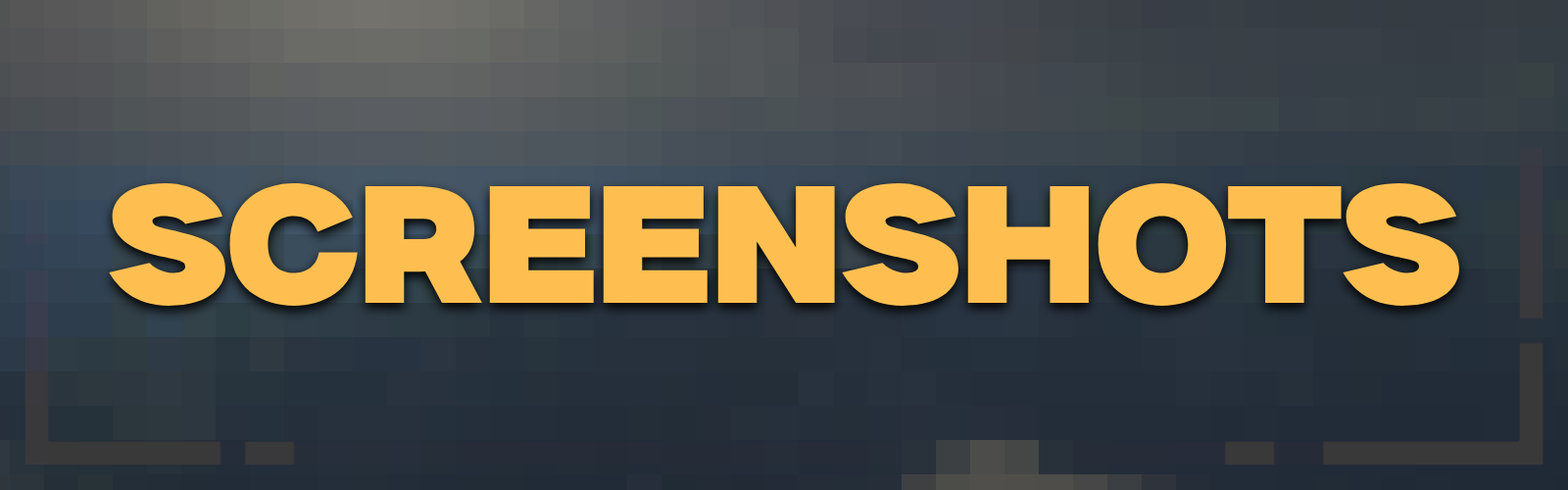
<style>
.page{position:relative;width:1568px;height:490px}
.page>*{position:absolute;margin:0}
.t1{font:166.6px "MilkerRegular";color:#ffbf50}
</style>
<div class="page">
<p class="t1" style="left:109px;top:183px;width:1350px;height:123px">SCREENSHOTS</p>
</div>
